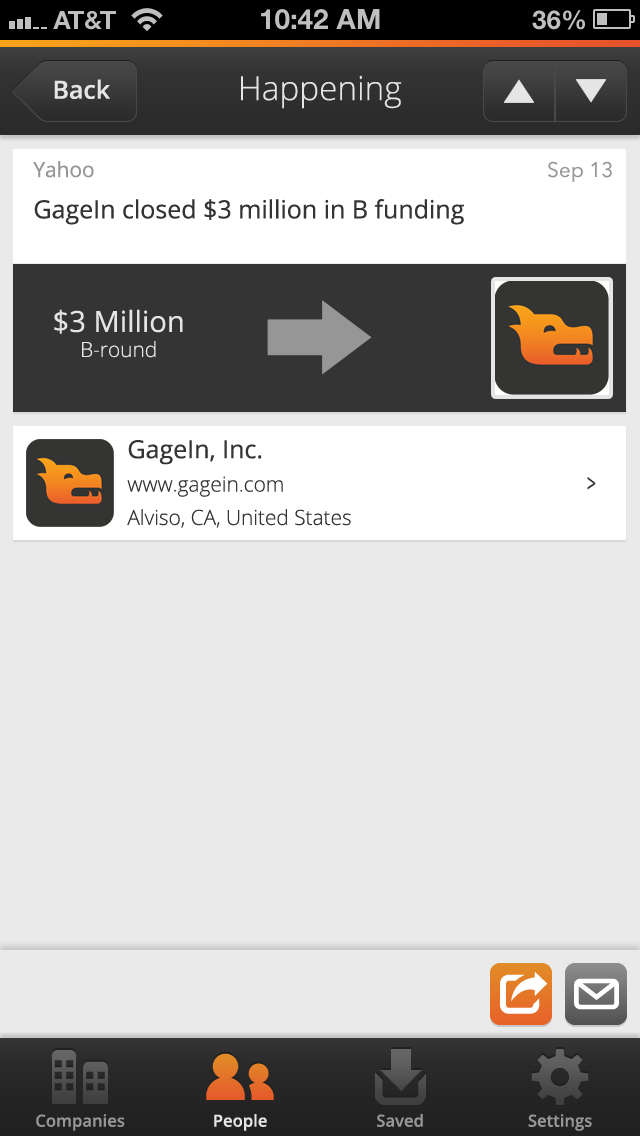
<style>
.page{position:relative;width:640px;height:1136px;background:#eaeaea}
.page>*{position:absolute;margin:0}
.t1{font:33.3px "OpenSans-Light";color:#e5e5e5}
.t2{font:25px "OpenSans-Semibold";color:#e5e5e5}
.t3{font:25px "OpenSans";color:#343434}
.t4{font:20.8px "OpenSans";color:#969696}
.t5{font:20.8px "AvenirNext-Regular";color:#969696}
.t6{font:29.2px "OpenSans";color:#e5e5e5}
.t7{font:20.8px "OpenSans-Light";color:#e5e5e5}
.t8{font:20.8px "OpenSans-Light";color:#343434}
.t9{font:25px "OpenSans";color:#343434;scale:0.64 1}
.t10{font:16.7px "OpenSans-Semibold";color:#969696}
.t11{font:16.7px "OpenSans-Semibold";color:#e5e5e5}
</style>
<div class="page">
<p class="t1" style="left:241px;top:75px;width:161px;height:34px">Happening</p>
<p class="t2" style="left:54px;top:79px;width:57px;height:20px">Back</p>
<p class="t3" style="left:33px;top:161px;width:431px;height:64px"><span class="t4">Yahoo<br></span>GageIn closed $3 million in B funding</p>
<p class="t5" style="left:548px;top:161px;width:64px;height:21px">Sep 13</p>
<p class="t6" style="left:54px;top:309px;width:129px;height:49px;text-align:center">$3 Million<br><span class="t7">B-round</span></p>
<p class="t8" style="left:127px;top:440px;width:224px;height:88px"><span class="t3">GageIn, Inc.<br></span>www.gagein.com<br>Alviso, CA, United States</p>
<p class="t9" style="left:587px;top:477px;width:9px;height:13px">&gt;</p>
<p class="t10" style="left:36px;top:1114px;width:89px;height:17px">Companies</p>
<p class="t11" style="left:214px;top:1114px;width:53px;height:17px">People</p>
<p class="t10" style="left:377px;top:1114px;width:46px;height:13px">Saved</p>
<p class="t10" style="left:528px;top:1114px;width:64px;height:17px">Settings</p>
</div>
